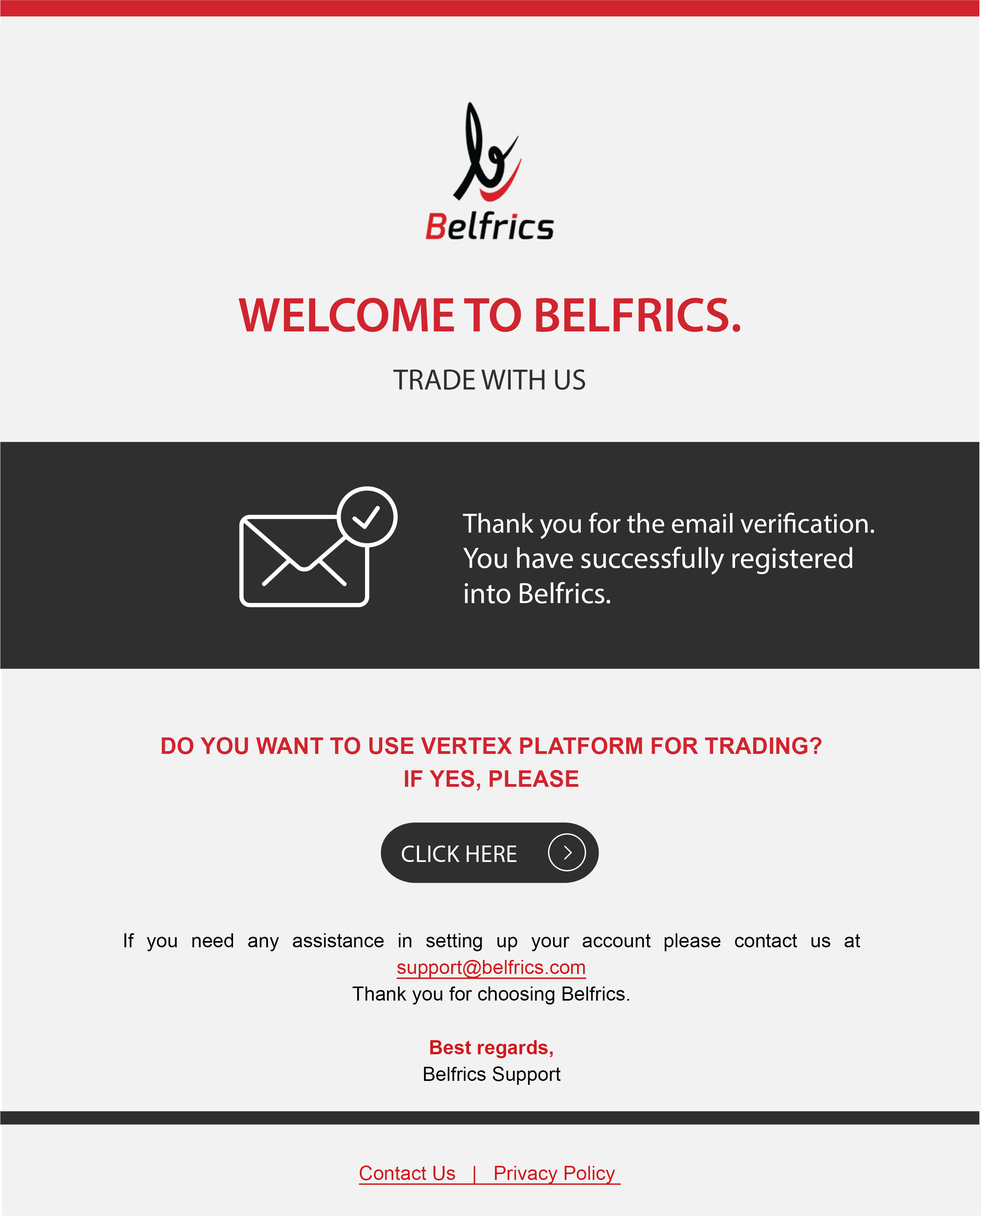
<style>
.page{position:relative;width:981px;height:1216px;background:#f2f2f2}
.page>*{position:absolute;margin:0}
.t1{font:29.4px "MyriadPro-Regular";color:#ffffff}
.t2{font:27.7px "MyriadPro-Regular";color:#ffffff}
.t3{font:19.6px/26.8px "ArialMT";color:#000000}
.t4{font:22.8px/32.6px "Arial-BoldMT";color:#d1242f;text-transform:uppercase}
.t5{font:19.6px/26.8px "ArialMT";color:#d1171a;text-decoration:underline}
.t6{font:19.6px/26.8px "Arial-BoldMT";color:#d1171a}
.t7{font:23.8px "Graphik-Regular";letter-spacing:0.01em;color:#ffffff}
.t8{font:19.6px "ArialMT";color:#d1171a;text-decoration:underline}
</style>
<div class="page">
<p class="t1" style="left:463px;top:513px;width:411px;height:90px"><span class="t2">Thank you for the email verification.<br></span>You have successfully registered into Belfrics.</p>
<p class="t3" style="left:124px;top:737px;width:736px;height:348px;text-align:justify"><span class="t4">Do you want to use Vertex Platform for trading? <br>If yes, Please <br><br><br><br><br><br></span>If you need any assistance in setting up your account please contact us at <span class="t5">support@belfrics.com<br></span>Thank you for choosing Belfrics.<br><span class="t6"><br>Best regards,<br></span>Belfrics Support</p>
<p class="t7" style="left:402px;top:845px;width:114px;height:17px">CLICK HERE</p>
<p class="t8" style="left:359px;top:1165px;width:262px;height:20px">Contact Us   |   Privacy Policy</p>
</div>
